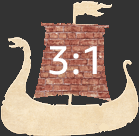
<style>
.page{position:relative;width:139px;height:136px;background:#333333}
.page>*{position:absolute;margin:0}
.t1{font:40px "AmazonEmber-Regular";color:#ffffff}
</style>
<div class="page">
<p class="t1" style="left:49px;top:46px;width:48px;height:29px">3:1</p>
</div>
